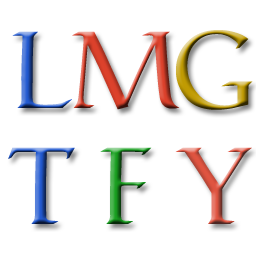
<style>
.page{position:relative;width:256px;height:256px;background:#ffffff}
.page>*{position:absolute;margin:0}
.t1{font:108px "Catull-Regular"}
</style>
<div class="page">
<p class="t1" style="left:176px;top:30px;width:77px;height:80px">G</p>
<p class="t1" style="left:12px;top:31px;width:60px;height:77px">L</p>
<p class="t1" style="left:72px;top:31px;width:108px;height:79px">M</p>
<p class="t1" style="left:8px;top:147px;width:67px;height:77px">T</p>
<p class="t1" style="left:100px;top:147px;width:52px;height:77px">F</p>
<p class="t1" style="left:175px;top:147px;width:77px;height:77px">Y</p>
</div>
